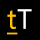
<style>
.page{position:relative;width:40px;height:40px;background:#000000}
.page>*{position:absolute;margin:0}
.t1{font:27.9px "SegoeUI";letter-spacing:0.025em;color:#ffc000;text-decoration:underline}
.t2{font:27.9px "SegoeUI";letter-spacing:0.025em;color:#ffffff}
</style>
<div class="page">
<p class="t1" style="left:7px;top:9px;width:25px;height:26px">t<span class="t2">T</span></p>
</div>
